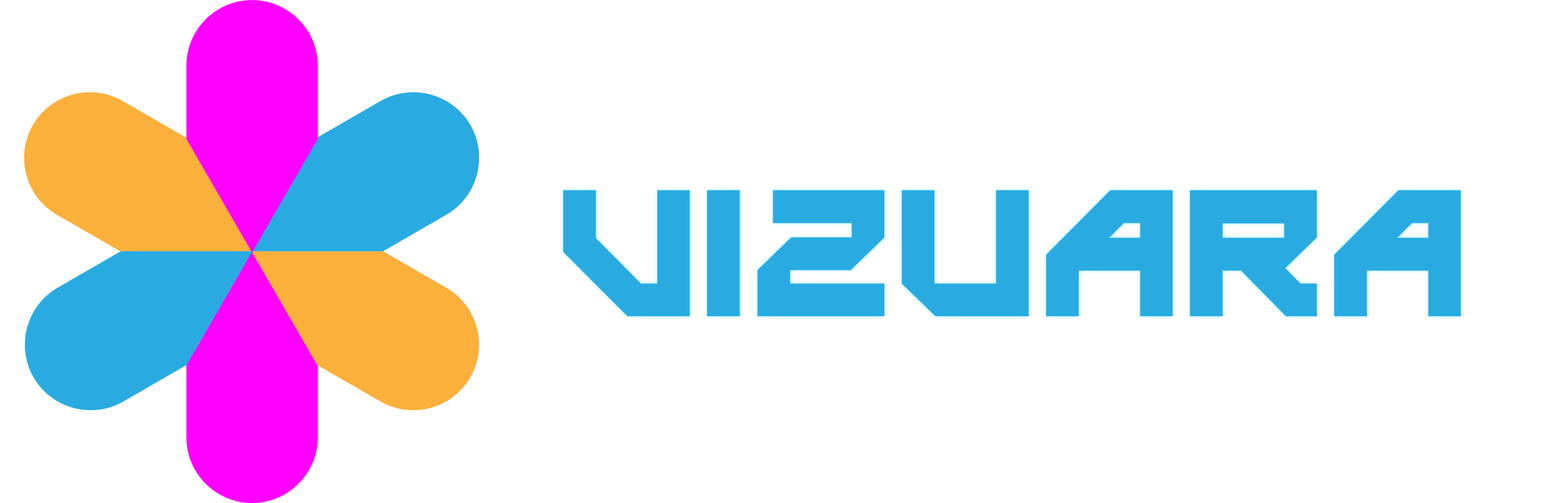
<style>
.page{position:relative;width:1568px;height:503px;background:#ffffff}
.page>*{position:absolute;margin:0}
.t1{font:175.5px "valorax";color:#29abe2}
</style>
<div class="page">
<p class="t1" style="left:563px;top:190px;width:898px;height:126px">vizuara</p>
</div>
